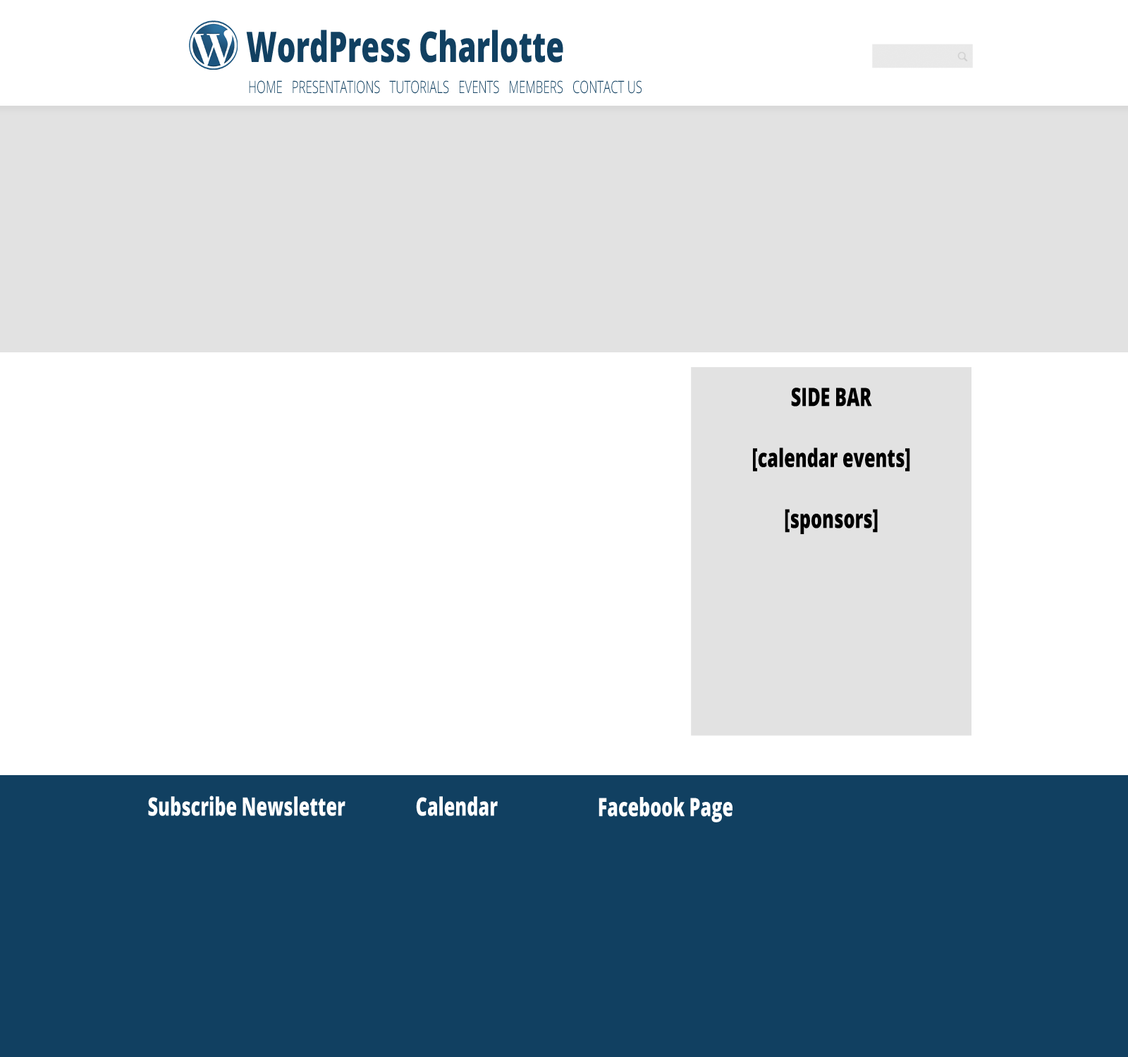
<style>
.page{position:relative;width:1128px;height:1057px;background:#ffffff}
.page>*{position:absolute;margin:0}
.t1{font:42.3px "OpenSans-Extrabold";color:#114061;scale:0.7 1}
.t2{font:16.9px "OpenSans-Light";color:#114061;scale:0.7 1}
.t3{font:25.4px "OpenSans-Extrabold";color:#000000;scale:0.7 1}
.t4{font:25.4px "OpenSans-Extrabold";color:#ffffff;scale:0.7 1}
</style>
<div class="page">
<p class="t1" style="left:246px;top:30px;width:317px;height:33px">WordPress Charlotte</p>
<p class="t2" style="left:249px;top:80px;width:392px;height:14px">HOME   PRESENTATIONS   TUTORIALS   EVENTS   MEMBERS   CONTACT US</p>
<p class="t3" style="left:753px;top:388px;width:157px;height:146px;text-align:center">SIDE BAR<br><br>[calendar events]<br><br>[sponsors]</p>
<p class="t4" style="left:148px;top:796px;width:197px;height:20px">Subscribe Newsletter</p>
<p class="t4" style="left:416px;top:797px;width:82px;height:19px">Calendar</p>
<p class="t4" style="left:598px;top:797px;width:134px;height:26px">Facebook Page</p>
</div>
